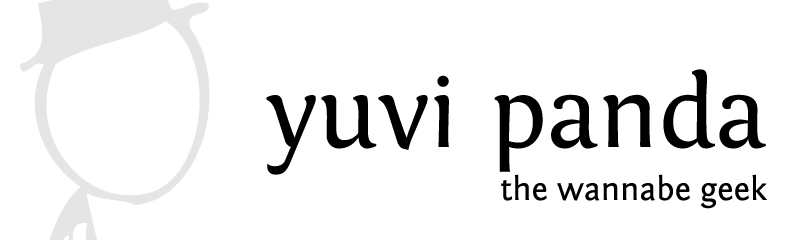
<style>
.page{position:relative;width:790px;height:240px;background:#ffffff}
.page>*{position:absolute;margin:0}
.t1{font:102.7px "Fontin-Regular";color:#000000}
.t2{font:33.3px "FontinSans-Regular";color:#000000}
</style>
<div class="page">
<p class="t1" style="left:266px;top:69px;width:500px;height:106px">yuvi panda</p>
<p class="t2" style="left:501px;top:174px;width:266px;height:35px">the wannabe geek</p>
</div>
